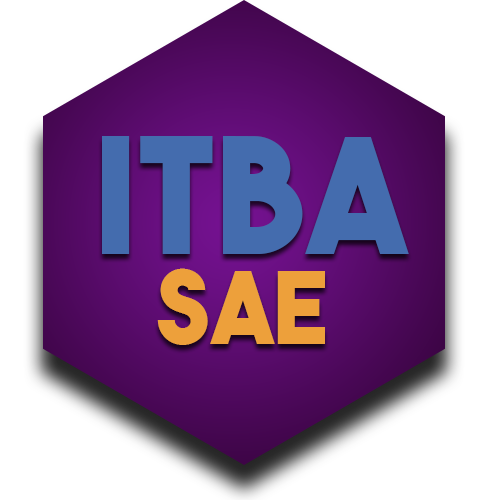
<style>
.page{position:relative;width:480px;height:500px;background:#ffffff}
.page>*{position:absolute;margin:0}
.t1{font:160px "TheBoldFont";color:#446cae}
.t2{font:100px "TheBoldFont";color:#eda03b}
</style>
<div class="page">
<p class="t1" style="left:102px;top:136px;width:307px;height:118px">ITBA</p>
<p class="t2" style="left:157px;top:268px;width:168px;height:77px">SAE</p>
</div>
